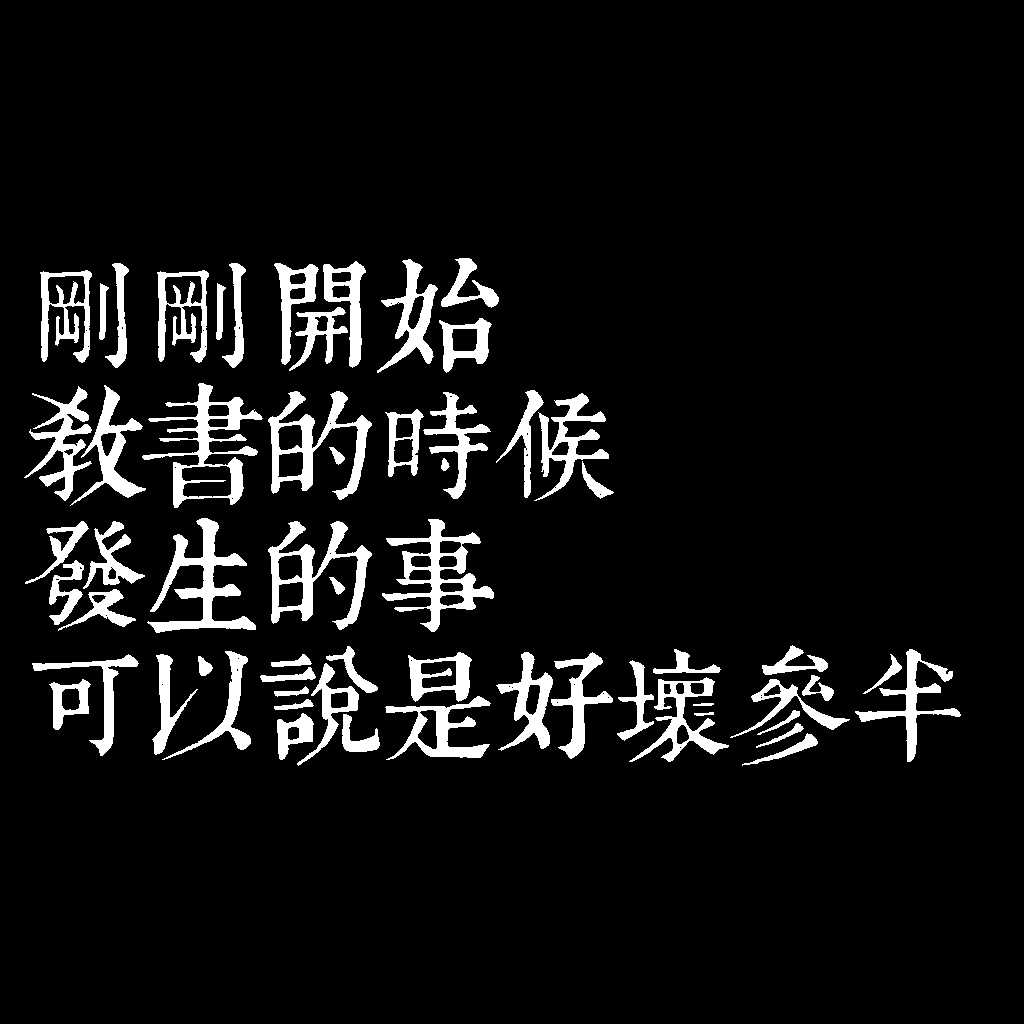
<style>
.page{position:relative;width:1024px;height:1024px;background:#000000}
.page>*{position:absolute;margin:0}
.t1{font:120px/130px "TpldKhangXiDictTrial";letter-spacing:-0.02em;color:#ffffff}
</style>
<div class="page">
<p class="t1" style="left:24px;top:258px;width:937px;height:508px">剛剛開始<br>教書的時候<br>發生的事<br>可以說是好壞參半</p>
</div>
